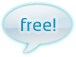
<style>
.page{position:relative;width:76px;height:57px;background:#ffffff}
.page>*{position:absolute;margin:0}
.t1{font:18px "Sansation-Regular";color:#1c8bb4}
</style>
<div class="page">
<p class="t1" style="left:21px;top:18px;width:35px;height:13px">free!</p>
</div>
